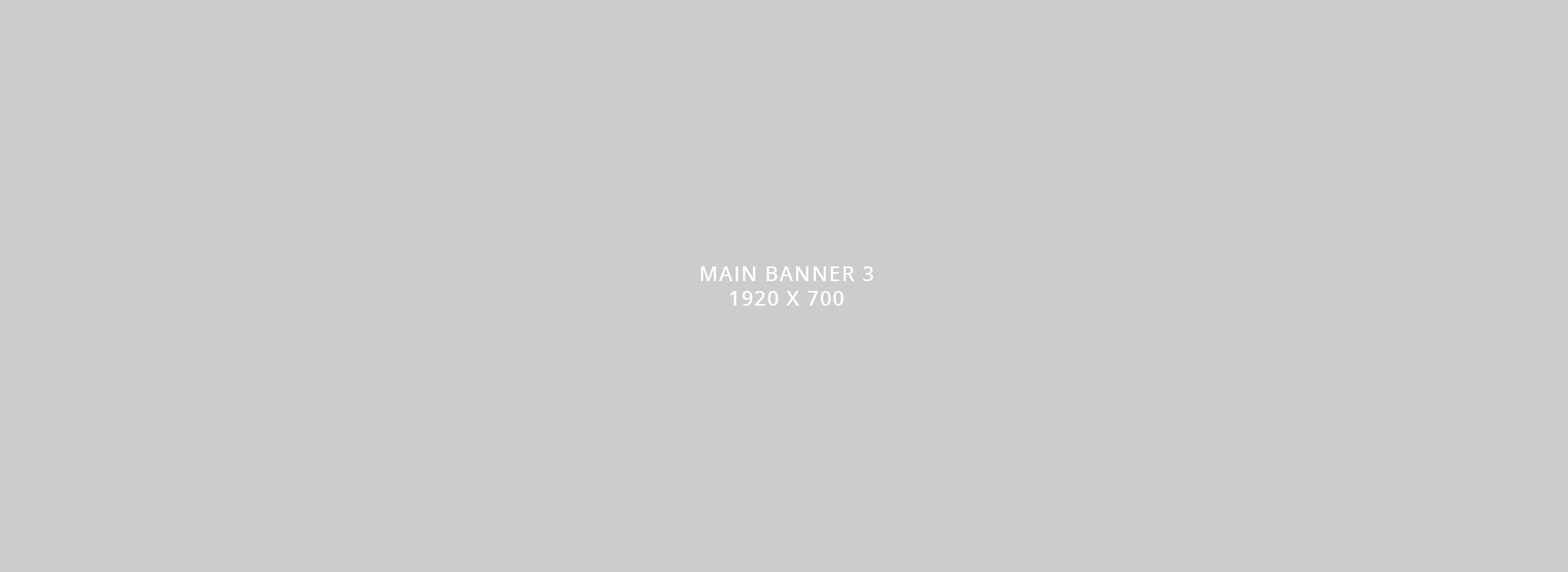
<style>
.page{position:relative;width:1568px;height:572px;background:#cccccc}
.page>*{position:absolute;margin:0}
.t1{font:20.4px "OpenSans-Semibold";letter-spacing:0.06em;color:#ffffff;text-transform:uppercase}
</style>
<div class="page">
<p class="t1" style="left:701px;top:266px;width:172px;height:39px;text-align:center">Main banner 3<br>1920 X 700</p>
</div>
